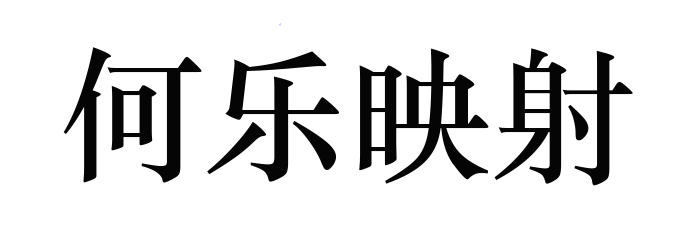
<style>
.page{position:relative;width:680px;height:252px;background:#ffffff}
.page>*{position:absolute;margin:0}
.t1{font:144px "STZhongsong";color:#050505}
</style>
<div class="page">
<p class="t1" style="left:63px;top:47px;width:570px;height:139px">何乐映射</p>
</div>
